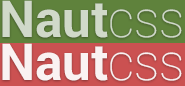
<style>
.page{position:relative;width:185px;height:86px}
.page>*{position:absolute;margin:0}
.t1{font:51px "Roboto-Bold";color:#d0d9c9}
.t2{font:51px "Roboto-Thin";color:#d0d9c9}
.t3{font:51px "Roboto-Bold";color:#ffffff}
.t4{font:51px "Roboto-Thin";color:#ffffff}
</style>
<div class="page">
<p class="t1" style="left:2px;top:0px;width:180px;height:38px">Naut<span class="t2">css</span></p>
<p class="t3" style="left:2px;top:43px;width:180px;height:38px">Naut<span class="t4">css</span></p>
</div>
